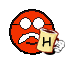
<style>
.page{position:relative;width:65px;height:65px;background:#ffffff}
.page>*{position:absolute;margin:0}
.t1{font:12px "ComicSansMS";color:#000000}
</style>
<div class="page">
<p class="t1" style="left:42px;top:37px;width:9px;height:10px">H</p>
</div>
